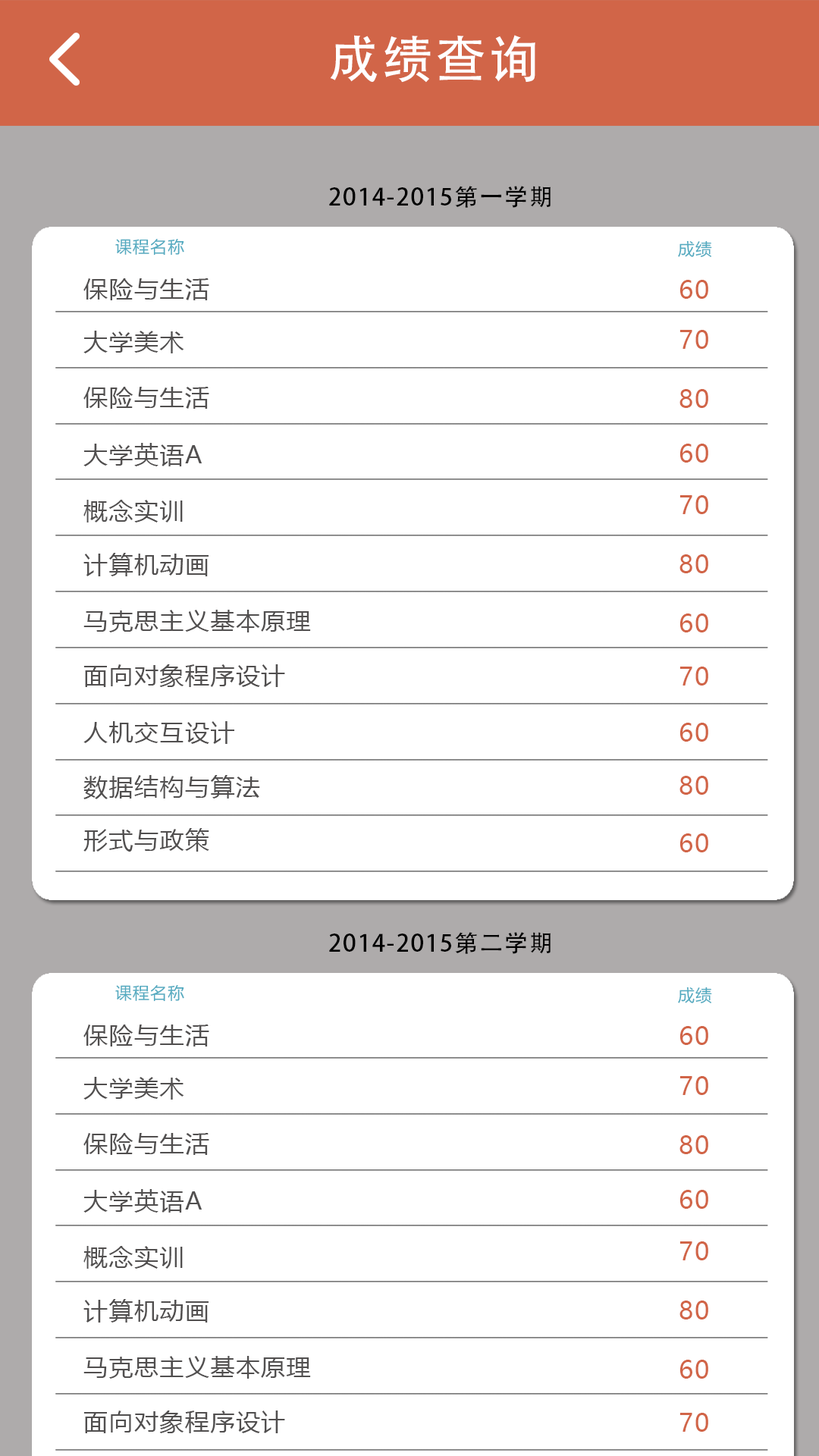
<style>
.page{position:relative;width:819px;height:1456px;background:#ffffff}
.page>*{position:absolute;margin:0}
.t1{font:50.8px "AdobeHeitiStd-Regular";letter-spacing:0.06em;color:#ffffff}
.t2{font:23.6px "AdobeHeitiStd-Regular";letter-spacing:0.06em;color:#000000}
.t3{font:16.5px "MicrosoftYaHei";letter-spacing:0.06em;color:#52aac0}
.t4{font:23.8px "MicrosoftYaHei";letter-spacing:0.06em;color:#514f4f}
.t5{font:24.5px "MicrosoftYaHei";letter-spacing:0.06em;color:#d16548}
</style>
<div class="page">
<p class="t1" style="left:330px;top:35px;width:205px;height:48px">成绩查询</p>
<p class="t2" style="left:329px;top:186px;width:222px;height:22px">2014-2015第一学期</p>
<p class="t3" style="left:115px;top:239px;width:69px;height:17px">课程名称</p>
<p class="t3" style="left:678px;top:240px;width:34px;height:17px">成绩</p>
<p class="t4" style="left:83px;top:278px;width:126px;height:22px">保险与生活</p>
<p class="t5" style="left:679px;top:280px;width:29px;height:19px">60</p>
<p class="t5" style="left:679px;top:330px;width:29px;height:19px">70</p>
<p class="t4" style="left:83px;top:331px;width:101px;height:22px">大学美术</p>
<p class="t4" style="left:83px;top:387px;width:126px;height:22px">保险与生活</p>
<p class="t5" style="left:679px;top:389px;width:29px;height:19px">80</p>
<p class="t4" style="left:83px;top:443px;width:119px;height:23px">大学英语A</p>
<p class="t5" style="left:679px;top:444px;width:29px;height:19px">60</p>
<p class="t5" style="left:679px;top:495px;width:29px;height:19px">70</p>
<p class="t4" style="left:83px;top:500px;width:100px;height:22px">概念实训</p>
<p class="t4" style="left:83px;top:553px;width:126px;height:23px">计算机动画</p>
<p class="t5" style="left:679px;top:554px;width:29px;height:19px">80</p>
<p class="t4" style="left:83px;top:610px;width:228px;height:22px">马克思主义基本原理</p>
<p class="t5" style="left:679px;top:613px;width:29px;height:19px">60</p>
<p class="t4" style="left:83px;top:664px;width:202px;height:23px">面向对象程序设计</p>
<p class="t5" style="left:679px;top:667px;width:29px;height:19px">70</p>
<p class="t4" style="left:83px;top:721px;width:151px;height:23px">人机交互设计</p>
<p class="t5" style="left:679px;top:723px;width:29px;height:19px">60</p>
<p class="t4" style="left:83px;top:775px;width:177px;height:24px">数据结构与算法</p>
<p class="t5" style="left:679px;top:776px;width:29px;height:19px">80</p>
<p class="t4" style="left:83px;top:828px;width:126px;height:24px">形式与政策</p>
<p class="t5" style="left:679px;top:833px;width:29px;height:19px">60</p>
<p class="t2" style="left:329px;top:932px;width:222px;height:22px">2014-2015第二学期</p>
<p class="t3" style="left:115px;top:985px;width:69px;height:17px">课程名称</p>
<p class="t3" style="left:678px;top:987px;width:34px;height:16px">成绩</p>
<p class="t4" style="left:83px;top:1024px;width:126px;height:22px">保险与生活</p>
<p class="t5" style="left:679px;top:1026px;width:29px;height:19px">60</p>
<p class="t4" style="left:83px;top:1077px;width:101px;height:23px">大学美术</p>
<p class="t5" style="left:679px;top:1076px;width:29px;height:19px">70</p>
<p class="t4" style="left:83px;top:1133px;width:126px;height:22px">保险与生活</p>
<p class="t5" style="left:679px;top:1135px;width:29px;height:19px">80</p>
<p class="t4" style="left:83px;top:1189px;width:119px;height:24px">大学英语A</p>
<p class="t5" style="left:679px;top:1190px;width:29px;height:19px">60</p>
<p class="t5" style="left:679px;top:1241px;width:29px;height:19px">70</p>
<p class="t4" style="left:83px;top:1246px;width:100px;height:23px">概念实训</p>
<p class="t4" style="left:83px;top:1299px;width:126px;height:24px">计算机动画</p>
<p class="t5" style="left:679px;top:1301px;width:29px;height:18px">80</p>
<p class="t4" style="left:83px;top:1356px;width:228px;height:23px">马克思主义基本原理</p>
<p class="t5" style="left:679px;top:1360px;width:29px;height:19px">60</p>
<p class="t4" style="left:83px;top:1410px;width:202px;height:23px">面向对象程序设计</p>
<p class="t5" style="left:679px;top:1413px;width:29px;height:19px">70</p>
</div>
